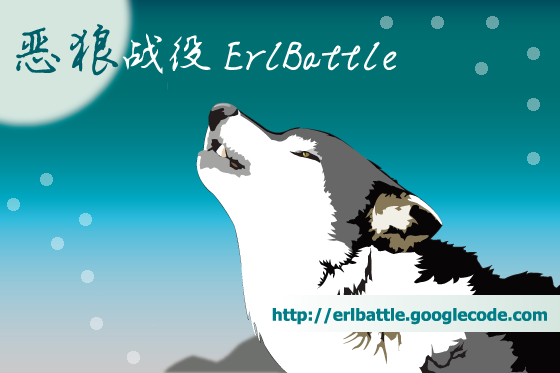
<style>
.page{position:relative;width:560px;height:373px}
.page>*{position:absolute;margin:0}
.t1{font:40.7px "HAKUYOGuiFanZi3500";color:#ffffff;scale:0.96 1}
.t2{font:16.7px "Tahoma-Bold";color:#007d86}
</style>
<div class="page">
<p class="t1" style="left:224px;top:41px;width:173px;height:30px">ErlBattle</p>
<p class="t2" style="left:272px;top:308px;width:275px;height:17px">http://erlbattle.googlecode.com</p>
</div>
